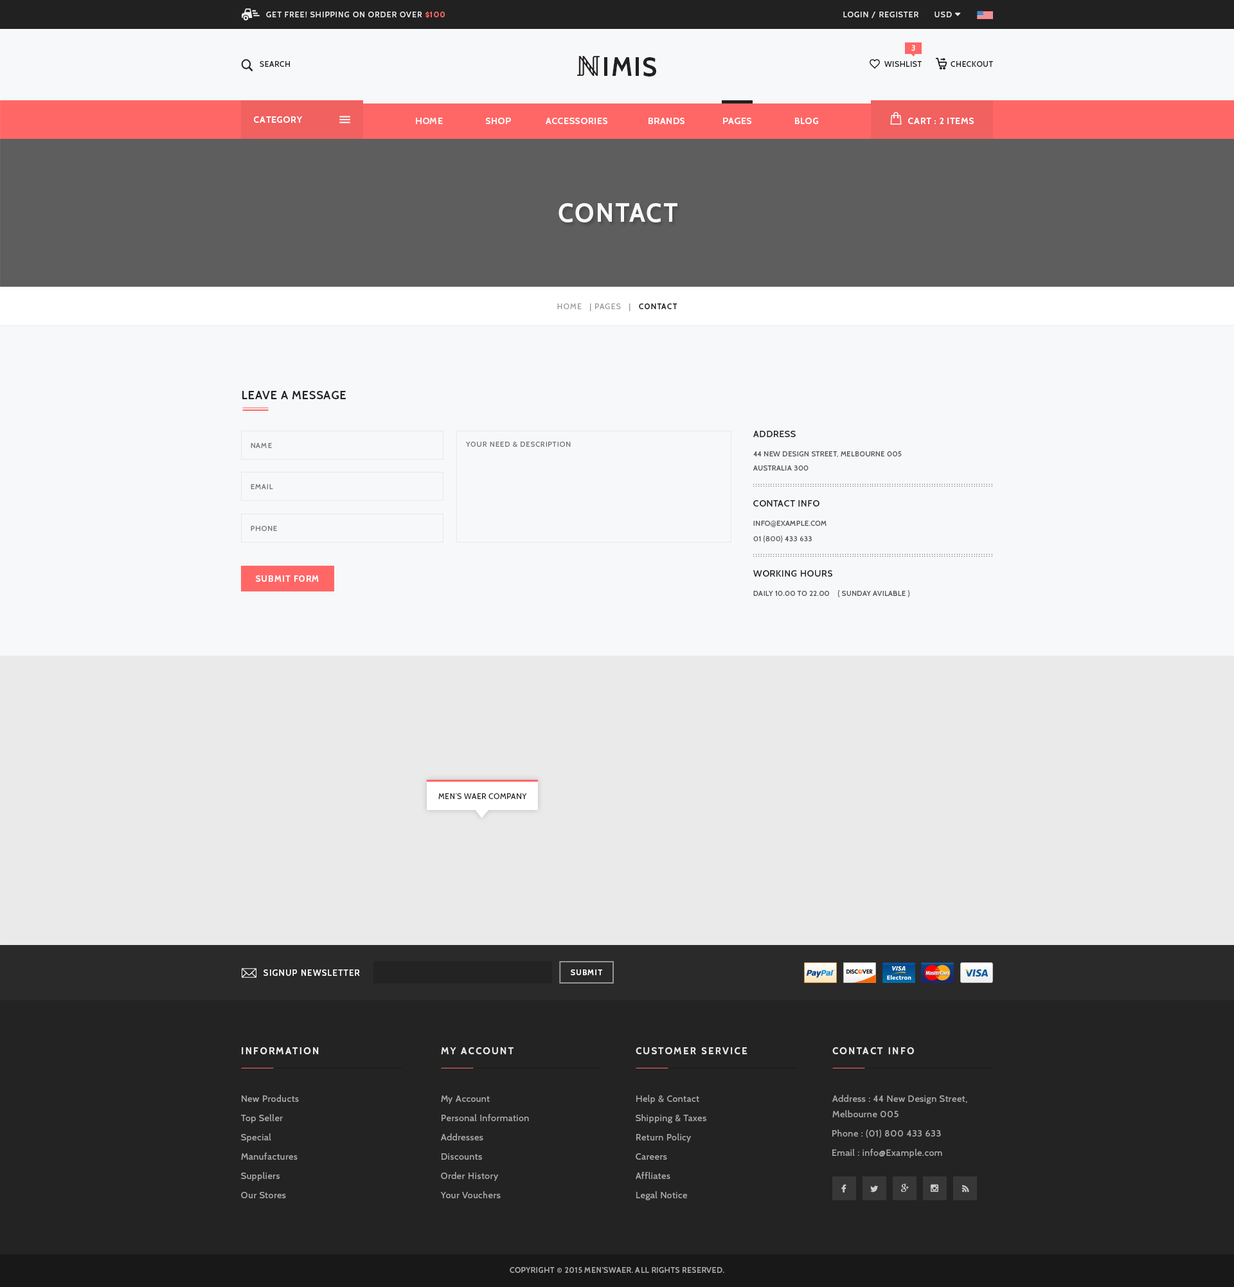
<style>
.page{position:relative;width:1234px;height:1287px;background:#f7f8f9}
.page>*{position:absolute;margin:0}
.t1{font:7.7px "Cabin-Medium";letter-spacing:0.1em;color:#e8e8e8;text-transform:uppercase}
.t2{font:7.7px "Cabin-Bold";letter-spacing:0.1em;color:#ff6766;text-transform:uppercase}
.t3{font:7.7px "Cabin-SemiBold";letter-spacing:0.05em;color:#ffffff;text-transform:uppercase}
.t4{font:7.7px "Cabin-Medium";letter-spacing:0.05em;color:#212121;text-transform:uppercase}
.t5{font:25.7px "Cabin-Bold";letter-spacing:0.05em;color:#212121;text-transform:uppercase}
.t6{font:9px "Cabin-Bold";letter-spacing:0.05em;color:#ffffff;text-transform:uppercase}
.t7{font:9px "Cabin-Bold";letter-spacing:0.05em;color:#f7f8f9;text-transform:uppercase}
.t8{font:25.7px "Cabin-Bold";letter-spacing:0.05em;color:#f7f8f9;text-transform:uppercase}
.t9{font:7.7px "Cabin-Regular";letter-spacing:0.1em;color:#999999;text-transform:uppercase}
.t10{font:7.7px "Cabin-SemiBold";letter-spacing:0.1em;color:#212121;text-transform:uppercase}
.t11{font:11.6px "Cabin-SemiBold";letter-spacing:0.05em;color:#212121;text-transform:uppercase}
.t12{font:9px "Cabin-Medium";letter-spacing:0.05em;color:#232323;text-transform:uppercase}
.t13{font:7.1px "Cabin-Regular";letter-spacing:0.1em;color:#777777;text-transform:uppercase}
.t14{font:7.1px/14.1px "Cabin-Regular";letter-spacing:0.05em;color:#555555;text-transform:uppercase}
.t15{font:5.1px "Cabin-Bold";letter-spacing:0.25em;color:#737373;text-transform:uppercase}
.t16{font:7.1px "Cabin-Regular";letter-spacing:0.05em;color:#555555;text-transform:uppercase}
.t17{font:7.1px "Lato-Regular";letter-spacing:0.05em;color:#555555;text-transform:uppercase}
.t18{font:7.1px "Cabin-Medium";letter-spacing:0.05em;color:#555555;text-transform:uppercase}
.t19{font:8.4px "Cabin-Bold";letter-spacing:0.1em;color:#ffffff;text-transform:uppercase}
.t20{font:7.7px "Cabin-Regular";letter-spacing:0.05em;color:#212121;text-transform:uppercase}
.t21{font:8.4px "Cabin-Medium";letter-spacing:0.1em;color:#ffffff;text-transform:uppercase}
.t22{font:7.7px "Cabin-SemiBold";letter-spacing:0.1em;color:#ffffff;text-transform:uppercase}
.t23{font:9.6px "Cabin-Bold";letter-spacing:0.15em;color:#eeeeee;text-transform:uppercase}
.t24{font:9.6px "Cabin-Bold";letter-spacing:0.15em;color:#e8e8e8;text-transform:uppercase}
.t25{font:9px "Cabin-Regular";letter-spacing:0.05em;color:#aaaaaa}
.t26{font:9px/15.4px "Cabin-Regular";letter-spacing:0.05em;color:#aaaaaa}
.t27{font:7.7px "Cabin-Medium";letter-spacing:0.05em;color:#aaaaaa;text-transform:uppercase}
</style>
<div class="page">
<p class="t1" style="left:266px;top:12px;width:179px;height:6px">get free! shipping on order over <span class="t2">$100</span></p>
<p class="t1" style="left:843px;top:12px;width:76px;height:6px">login / register</p>
<p class="t3" style="left:912px;top:45px;width:3px;height:6px">3</p>
<p class="t4" style="left:260px;top:61px;width:30px;height:6px">search</p>
<p class="t5" style="left:604px;top:57px;width:52px;height:19px">imis</p>
<p class="t4" style="left:885px;top:61px;width:37px;height:6px">wishlist</p>
<p class="t4" style="left:951px;top:61px;width:42px;height:6px">checkout</p>
<p class="t6" style="left:254px;top:116px;width:48px;height:7px">category</p>
<p class="t6" style="left:416px;top:118px;width:402px;height:6px"><span class="t7">home  </span>               shop              accessories                brands               pages                 Blog</p>
<p class="t6" style="left:908px;top:118px;width:66px;height:6px">cart : 2 items</p>
<p class="t8" style="left:559px;top:203px;width:119px;height:19px">contact</p>
<p class="t9" style="left:557px;top:303px;width:121px;height:8px">home   | Pages   |  <span class="t10"> Contact</span></p>
<p class="t11" style="left:242px;top:391px;width:104px;height:8px">Leave A message</p>
<p class="t12" style="left:753px;top:431px;width:43px;height:6px">Address</p>
<p class="t13" style="left:251px;top:443px;width:21px;height:5px">Name</p>
<p class="t13" style="left:466px;top:442px;width:105px;height:5px">Your Need &amp; Description</p>
<p class="t14" style="left:753px;top:451px;width:149px;height:20px">44 new Design Street, Melbourne 005<br>Australia 300</p>
<p class="t13" style="left:251px;top:484px;width:22px;height:5px">Email</p>
<p class="t15" style="left:753px;top:485px;width:240px;height:2px">.................................................................................................</p>
<p class="t15" style="left:753px;top:483px;width:240px;height:2px">.................................................................................................</p>
<p class="t12" style="left:753px;top:500px;width:67px;height:7px">Contact info</p>
<p class="t16" style="left:753px;top:521px;width:74px;height:6px">Info<span class="t17">@</span>Example.com</p>
<p class="t13" style="left:251px;top:526px;width:26px;height:5px">phone</p>
<p class="t18" style="left:753px;top:536px;width:59px;height:7px">01 (800) 433 633</p>
<p class="t15" style="left:753px;top:555px;width:240px;height:2px">.................................................................................................</p>
<p class="t15" style="left:753px;top:554px;width:240px;height:1px">.................................................................................................</p>
<p class="t19" style="left:256px;top:575px;width:63px;height:7px">Submit Form</p>
<p class="t12" style="left:753px;top:570px;width:80px;height:7px">Working hours</p>
<p class="t16" style="left:753px;top:590px;width:157px;height:7px">Daily 10.00 to 22.00    ( Sunday Avilable )</p>
<p class="t20" style="left:438px;top:793px;width:89px;height:6px">MEn’s Waer Company</p>
<p class="t21" style="left:264px;top:969px;width:96px;height:7px">signup newsletter</p>
<p class="t22" style="left:571px;top:969px;width:31px;height:6px">Submit</p>
<p class="t23" style="left:242px;top:1047px;width:77px;height:7px">information</p>
<p class="t24" style="left:441px;top:1047px;width:73px;height:7px">my account</p>
<p class="t24" style="left:636px;top:1047px;width:112px;height:7px">customer service</p>
<p class="t24" style="left:833px;top:1047px;width:81px;height:7px">contact Info</p>
<p class="t25" style="left:242px;top:1095px;width:57px;height:7px">New Products</p>
<p class="t25" style="left:441px;top:1095px;width:49px;height:9px">My Account</p>
<p class="t25" style="left:636px;top:1095px;width:63px;height:9px">Help &amp; Contact</p>
<p class="t26" style="left:833px;top:1095px;width:135px;height:22px">Address : 44 New Design Street,<br>Melbourne 005</p>
<p class="t25" style="left:241px;top:1114px;width:42px;height:9px">Top Seller</p>
<p class="t25" style="left:442px;top:1114px;width:87px;height:7px">Personal Information</p>
<p class="t25" style="left:636px;top:1114px;width:70px;height:9px">Shipping &amp; Taxes</p>
<p class="t25" style="left:241px;top:1133px;width:30px;height:9px">Special</p>
<p class="t25" style="left:441px;top:1133px;width:42px;height:7px">Addresses</p>
<p class="t25" style="left:636px;top:1133px;width:55px;height:9px">Return Policy</p>
<p class="t25" style="left:833px;top:1130px;width:108px;height:8px">Phone : (01) 800 433 633</p>
<p class="t25" style="left:241px;top:1153px;width:57px;height:7px">Manufactures</p>
<p class="t25" style="left:442px;top:1153px;width:40px;height:7px">Discounts</p>
<p class="t25" style="left:636px;top:1153px;width:31px;height:7px">Careers</p>
<p class="t25" style="left:833px;top:1149px;width:109px;height:9px">Email : info@Example.com</p>
<p class="t25" style="left:241px;top:1172px;width:39px;height:9px">Suppliers</p>
<p class="t25" style="left:441px;top:1172px;width:57px;height:9px">Order History</p>
<p class="t25" style="left:636px;top:1172px;width:34px;height:7px">Affliates</p>
<p class="t25" style="left:241px;top:1192px;width:45px;height:6px">Our Stores</p>
<p class="t25" style="left:440px;top:1191px;width:61px;height:7px">Your Vouchers</p>
<p class="t25" style="left:636px;top:1191px;width:51px;height:9px">Legal Notice</p>
<p class="t27" style="left:510px;top:1267px;width:214px;height:6px">Copyright © 2015 Men’swaer. All Rights Reserved.</p>
</div>
